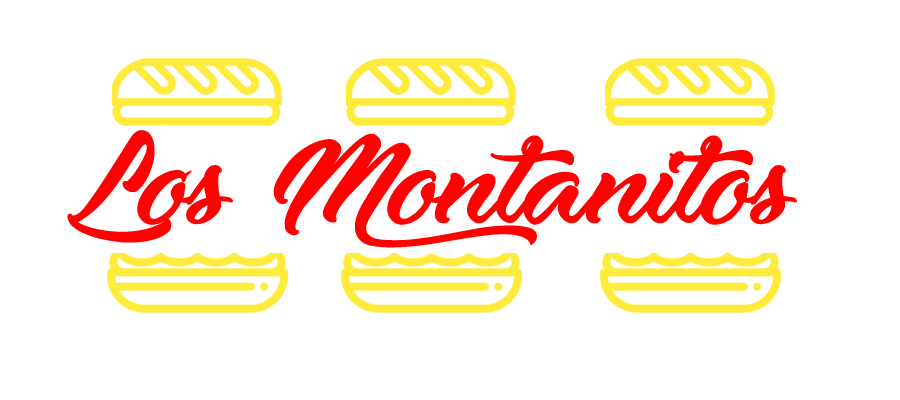
<style>
.page{position:relative;width:900px;height:400px;background:#ffffff}
.page>*{position:absolute;margin:0}
.t1{font:181.2px "Moonlights-on-the-Beach";color:#ff0101}
</style>
<div class="page">
<p class="t1" style="left:67px;top:130px;width:730px;height:118px">Los Montanitos</p>
</div>
